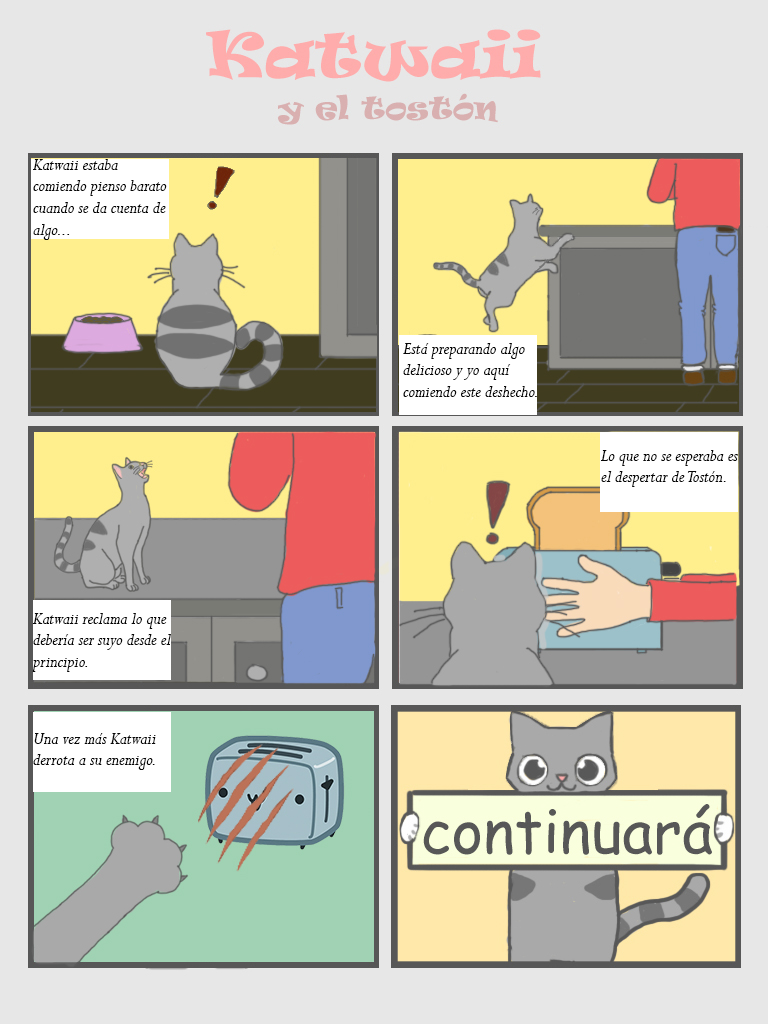
<style>
.page{position:relative;width:768px;height:1024px;background:#e7e7e7}
.page>*{position:absolute;margin:0}
.t1{font:18px "Perpetua-Italic";color:#060606}
</style>
<div class="page">
<p class="t1" style="left:33px;top:159px;width:134px;height:81px">Katwaii estaba comiendo pienso barato cuando se da cuenta de algo...</p>
<p class="t1" style="left:403px;top:343px;width:134px;height:54px">Está preparando algo delicioso y yo aquí comiendo este deshecho.</p>
<p class="t1" style="left:601px;top:450px;width:137px;height:37px">Lo que no se esperaba es el despertar de Tostón.</p>
<p class="t1" style="left:32px;top:613px;width:139px;height:59px">Katwaii reclama lo que debería ser suyo desde el principio.</p>
<p class="t1" style="left:33px;top:733px;width:123px;height:37px">Una vez más Katwaii derrota a su enemigo.</p>
</div>
